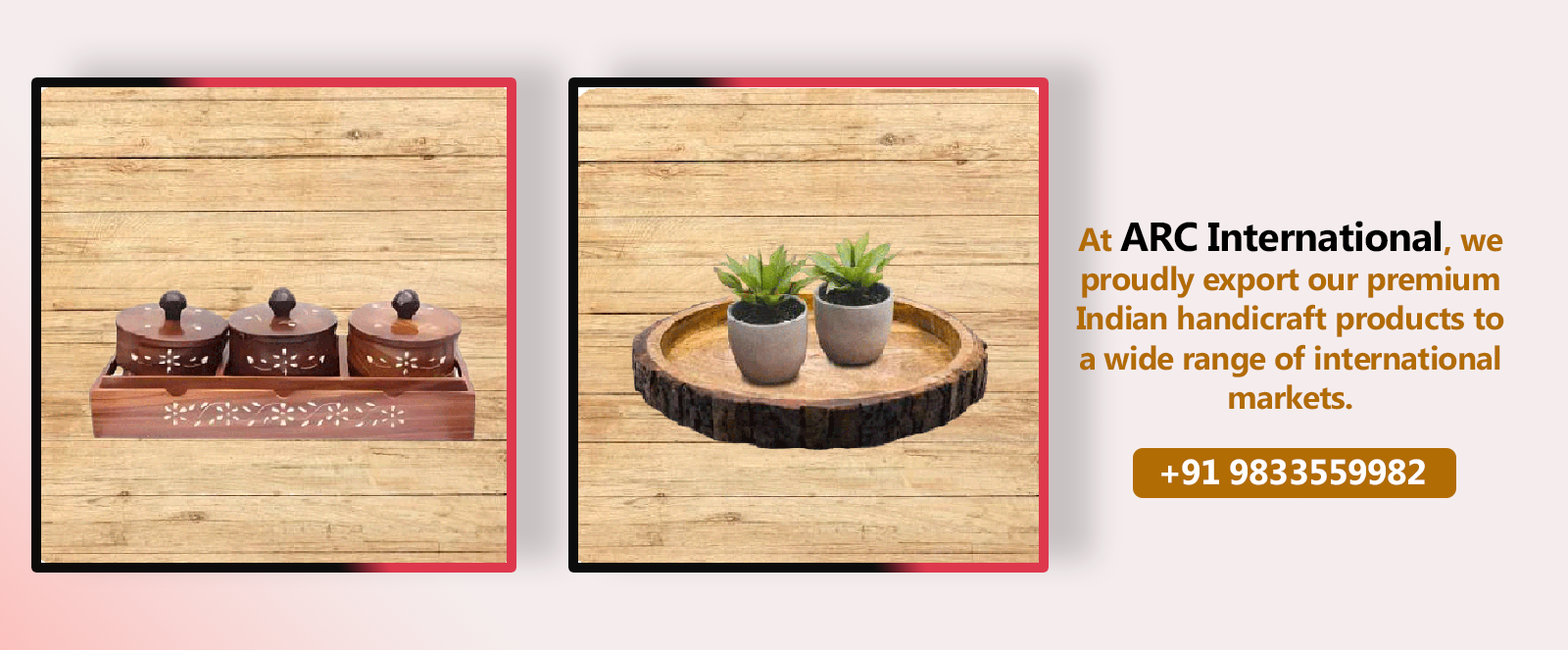
<style>
.page{position:relative;width:1568px;height:650px;background:#f5eded}
.page>*{position:absolute;margin:0}
.t1{font:32.9px "MicrosoftPhagsPa-Bold";letter-spacing:-0.025em;color:#b26c04}
.t2{font:40.8px "MicrosoftPhagsPa-Bold";letter-spacing:-0.025em;color:#000000}
.t3{font:35.3px "MicrosoftPhagsPa-Bold";letter-spacing:-0.025em;color:#ffffff}
</style>
<div class="page">
<p class="t1" style="left:1076px;top:220px;width:428px;height:190px;text-align:center">At <span class="t2">ARC International</span>, we proudly export our premium Indian handicraft products to a wide range of international markets.</p>
<p class="t3" style="left:1161px;top:459px;width:264px;height:26px">+91 9833559982</p>
</div>
